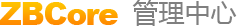
<style>
.page{position:relative;width:237px;height:26px;background:#ffffff}
.page>*{position:absolute;margin:0}
.t1{font:31px "Arial-Black";letter-spacing:-0.04em}
.t2{font:26px "MicrosoftYaHei";color:#7f7f7f}
</style>
<div class="page">
<p class="t1" style="left:0px;top:2px;width:118px;height:23px">ZBCore</p>
<p class="t2" style="left:132px;top:0px;width:105px;height:26px">管理中心</p>
</div>
